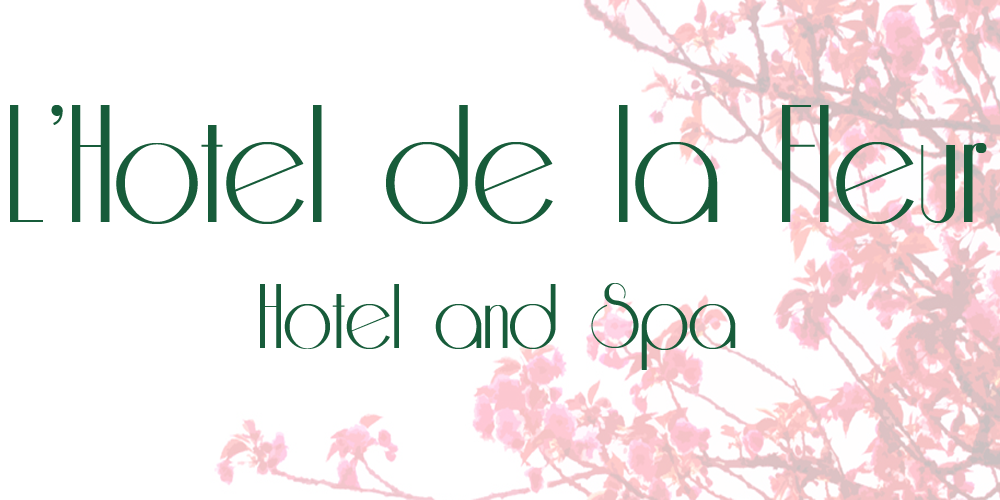
<style>
.page{position:relative;width:1000px;height:500px;background:#ffffff}
.page>*{position:absolute;margin:0}
.t1{font:190.5px "Riesling";color:#175c3a}
.t2{font:105.8px "Riesling";color:#175c3a}
.t3{font:282.2px "Riesling";color:#175c3a}
</style>
<div class="page">
<p class="t1" style="left:10px;top:105px;width:977px;height:265px;text-align:center">L’Hotel de la Fleur<br><span class="t2">Hotel and Spa<br></span><span class="t3">vyv</span></p>
</div>
